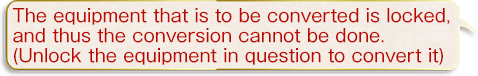
<style>
.page{position:relative;width:478px;height:76px}
.page>*{position:absolute;margin:0}
.t1{font:18px/20px "GothicMB101Pro-Regular";color:#bd0800}
</style>
<div class="page">
<p class="t1" style="left:13px;top:8px;width:437px;height:57px">The equipment that is to be converted is locked,<br>and thus the conversion cannot be done.<br>(Unlock the equipment in question to convert it)</p>
</div>
